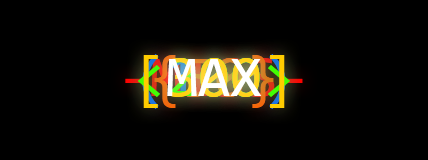
<style>
.page{position:relative;width:428px;height:160px;background:#000000}
.page>*{position:absolute;margin:0}
.t1{font:58px "Consolas"}
.t2{font:58px "Consolas";color:#ffffff}
</style>
<div class="page">
<p class="t1" style="left:142px;top:54px;width:144px;height:55px">(100)</p>
<p class="t1" style="left:138px;top:58px;width:152px;height:39px">&lt;200&gt;</p>
<p class="t1" style="left:143px;top:55px;width:142px;height:53px">[300]</p>
<p class="t1" style="left:154px;top:55px;width:120px;height:53px">{50}</p>
<p class="t2" style="left:167px;top:59px;width:95px;height:37px">MAX</p>
</div>
